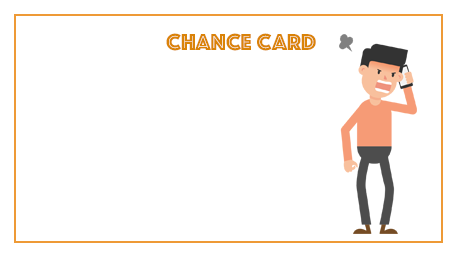
<style>
.page{position:relative;width:458px;height:257px;background:#ffffff}
.page>*{position:absolute;margin:0}
.t1{font:24px "Phosphate-Inline";color:#da8308}
</style>
<div class="page">
<p class="t1" style="left:166px;top:33px;width:150px;height:18px">CHANCE CARD</p>
</div>
